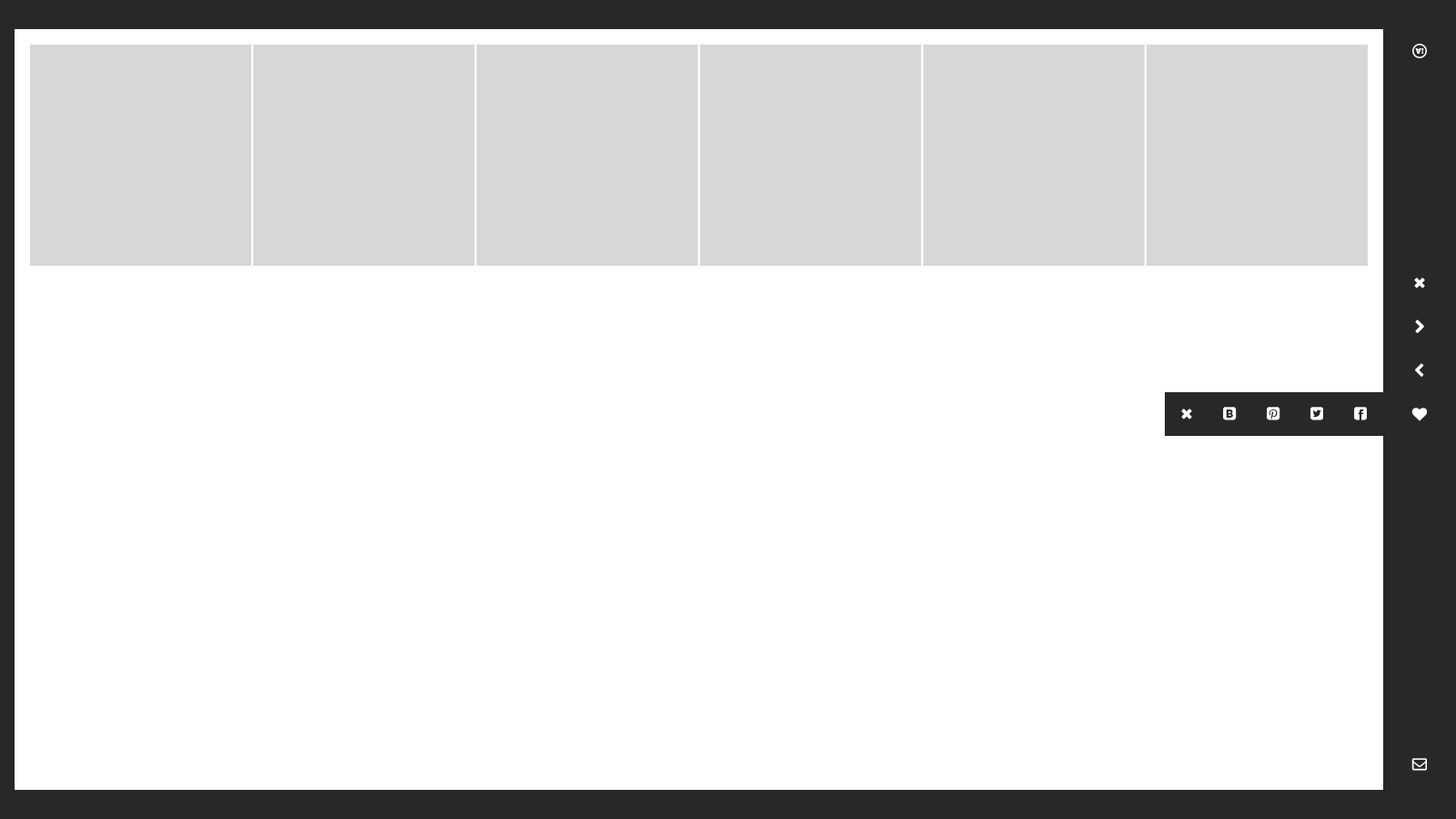
<style>
.page{position:relative;width:1456px;height:819px;background:#ffffff}
.page>*{position:absolute;margin:0}
.t1{font:10.9px "HelveticaNeueCyr-Heavy";color:#282828}
</style>
<div class="page">
<p class="t1" style="left:1226px;top:409px;width:7px;height:9px">В</p>
</div>
